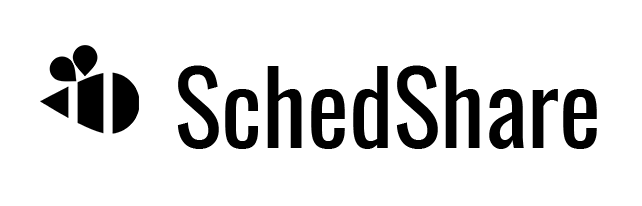
<style>
.page{position:relative;width:642px;height:206px;background:#ffffff}
.page>*{position:absolute;margin:0}
.t1{font:100px "Oswald-Regular";color:#000000}
</style>
<div class="page">
<p class="t1" style="left:177px;top:65px;width:420px;height:84px">SchedShare</p>
</div>
